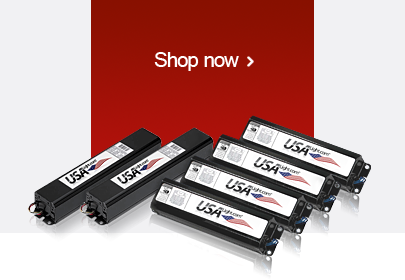
<style>
.page{position:relative;width:405px;height:280px;background:#f1f1f3}
.page>*{position:absolute;margin:0}
.t1{font:39.1px "Raavi";letter-spacing:-0.05em;color:#ffffff}
</style>
<div class="page">
<p class="t1" style="left:154px;top:52px;width:85px;height:19px">Shop now</p>
</div>
